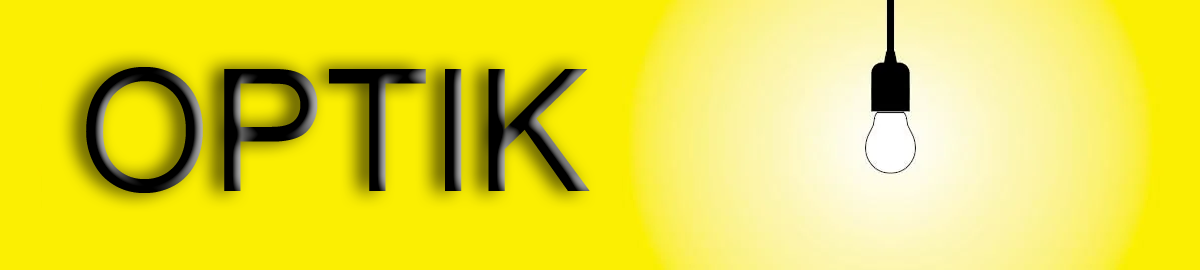
<style>
.page{position:relative;width:1200px;height:270px;background:#fbef02}
.page>*{position:absolute;margin:0}
.t1{font:170.6px "ArialMT";color:#000000}
</style>
<div class="page">
<p class="t1" style="left:86px;top:67px;width:504px;height:126px">OPTIK</p>
</div>
